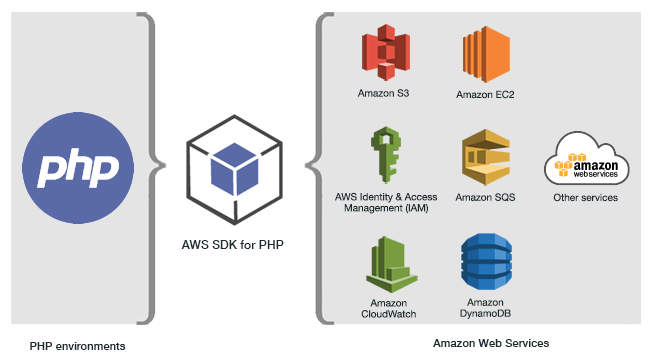
<style>
.page{position:relative;width:650px;height:362px;background:#e4e4e4}
.page>*{position:absolute;margin:0}
.t1{font:10px "HelveticaNeue";color:#1d2a2e}
.t2{font:10px/11px "HelveticaNeue";color:#1d2a2e}
.t3{font:12.1px "HelveticaNeue-Medium";color:#1d2a2e}
.t4{font:11.2px "HelveticaNeue-Medium";color:#1d2a2e}
</style>
<div class="page">
<p class="t1" style="left:357px;top:89px;width:52px;height:8px">Amazon S3</p>
<p class="t1" style="left:456px;top:90px;width:58px;height:9px">Amazon EC2</p>
<p class="t2" style="left:335px;top:192px;width:103px;height:22px;text-align:center">AWS Identity &amp; Access<br>Management (IAM)</p>
<p class="t1" style="left:455px;top:193px;width:61px;height:9px">Amazon SQS</p>
<p class="t1" style="left:553px;top:193px;width:65px;height:9px">Other services</p>
<p class="t3" style="left:181px;top:240px;width:103px;height:9px">AWS SDK for PHP</p>
<p class="t2" style="left:361px;top:299px;width:55px;height:19px;text-align:center">Amazon<br>CloudWatch</p>
<p class="t2" style="left:460px;top:298px;width:51px;height:21px;text-align:center">Amazon<br>DynamoDB</p>
<p class="t4" style="left:30px;top:342px;width:96px;height:8px">PHP environments</p>
<p class="t4" style="left:433px;top:339px;width:116px;height:8px">Amazon Web Services</p>
</div>
